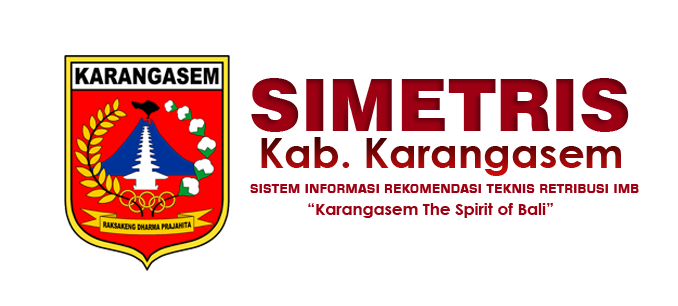
<style>
.page{position:relative;width:678px;height:306px;background:#ffffff}
.page>*{position:absolute;margin:0}
.t1{font:72px "Swiss721BT-Black";color:#9e0013}
.t2{font:10.1px "CenturyGothic-Bold"}
.t3{font:12.5px "Square721BT-Bold";color:#9e0013}
.t4{font:16.3px "CenturyGothic-Bold";color:#9e0013}
</style>
<div class="page">
<p class="t1" style="left:251px;top:78px;width:378px;height:54px">SIMETRIS</p>
<p class="t2" style="left:261px;top:137px;width:360px;height:39px">Kab. Karangasem</p>
<p class="t3" style="left:250px;top:184px;width:389px;height:9px">SISTEM INFORMASI REKOMENDASI TEKNIS RETRIBUSI IMB</p>
<p class="t4" style="left:308px;top:203px;width:245px;height:15px">“Karangasem The Spirit of Bali”</p>
</div>
